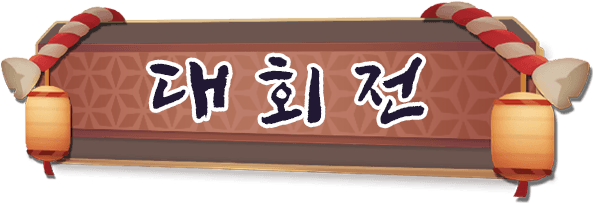
<style>
.page{position:relative;width:594px;height:204px;background:#ffffff}
.page>*{position:absolute;margin:0}
.t1{font:94.1px "SangSangRockOTF";letter-spacing:0.3em;color:#211933}
.t2{font:83.7px "SangSangRockOTF";letter-spacing:0.38em;color:#211933}
.t3{font:83.7px "SangSangRockOTF";letter-spacing:0.3em;color:#211933}
</style>
<div class="page">
<p class="t1" style="left:149px;top:56px;width:276px;height:69px">대<span class="t2">회</span><span class="t3">전</span></p>
</div>
